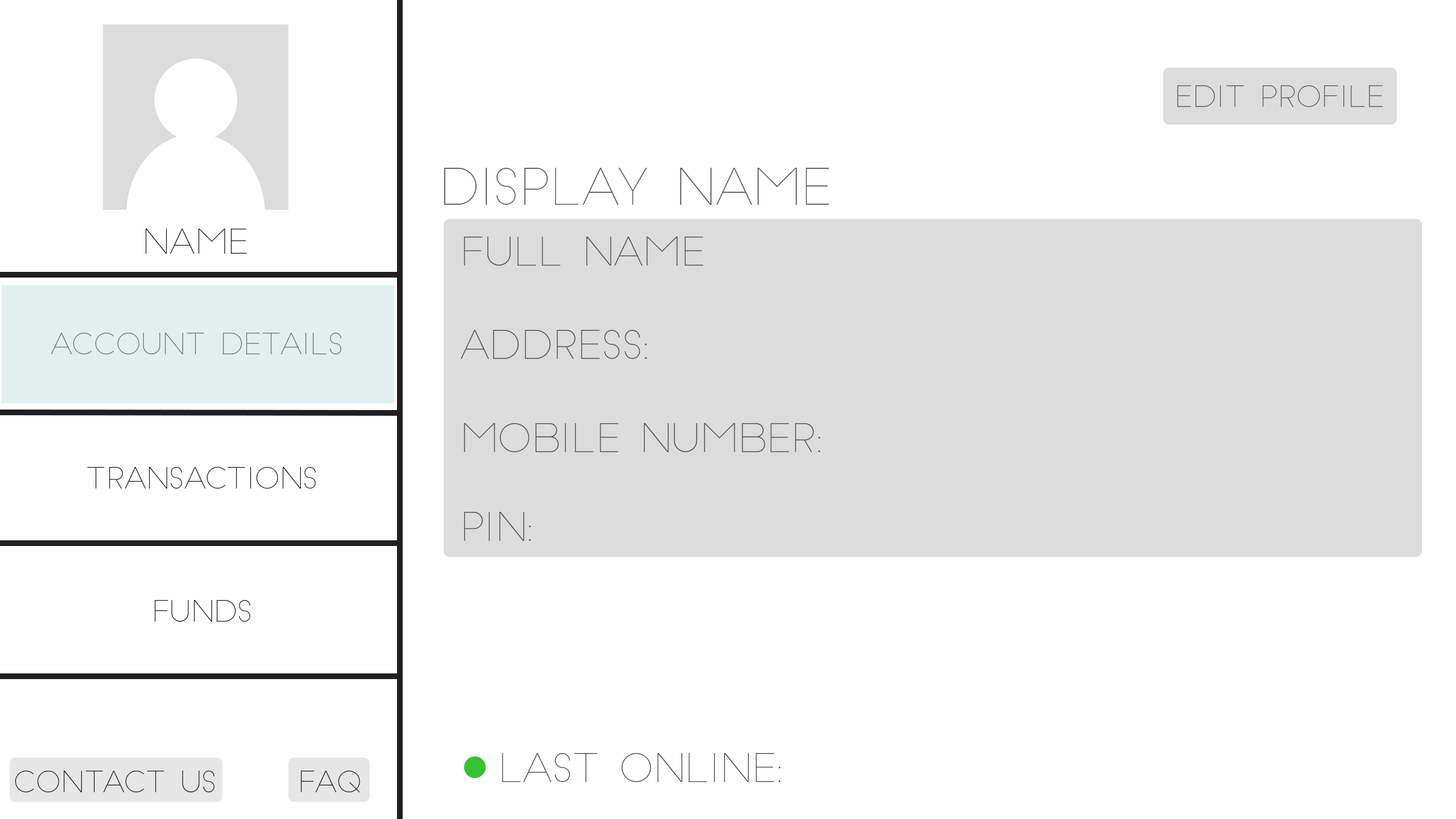
<style>
.page{position:relative;width:1456px;height:819px;background:#ffffff}
.page>*{position:absolute;margin:0}
.t1{font:29px "SlimJoe";color:#575757}
.t2{font:49.5px "SlimJoe";color:#575757}
.t3{font:38.8px "SlimJoe";color:#575757}
</style>
<div class="page">
<p class="t1" style="left:1177px;top:85px;width:206px;height:22px">edit profile</p>
<p class="t2" style="left:444px;top:168px;width:385px;height:37px">DisPLAy NAME</p>
<p class="t3" style="left:464px;top:237px;width:240px;height:29px">FULL name</p>
<p class="t3" style="left:461px;top:330px;width:186px;height:29px">ADDRESS:</p>
<p class="t3" style="left:464px;top:423px;width:356px;height:29px">Mobile number:</p>
<p class="t3" style="left:464px;top:512px;width:67px;height:29px">PIN:</p>
<p class="t3" style="left:502px;top:753px;width:278px;height:29px">last online:</p>
</div>
